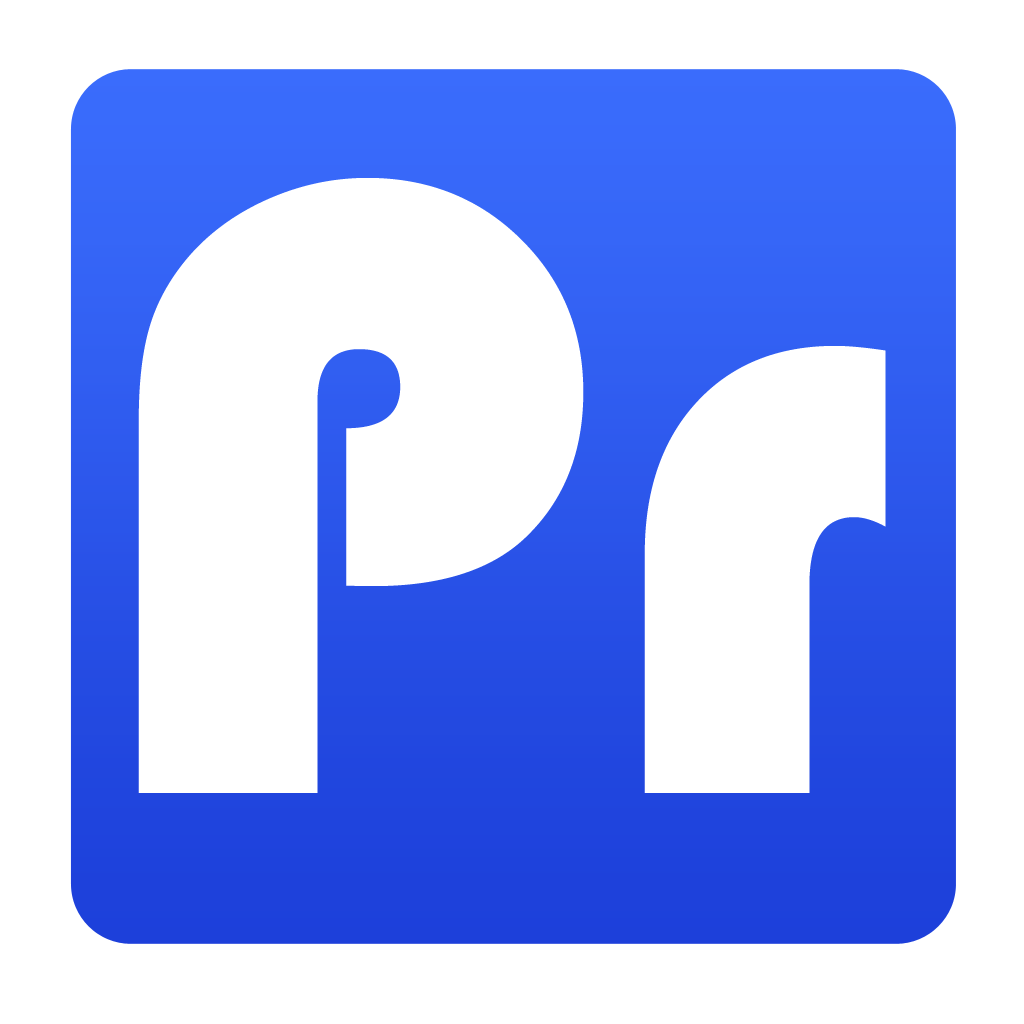
<style>
.page{position:relative;width:1024px;height:1024px;background:#ffffff}
.page>*{position:absolute;margin:0}
.t1{font:900px "Bauhaus93";color:#ffffff}
</style>
<div class="page">
<p class="t1" style="left:138px;top:178px;width:748px;height:615px">Pr</p>
</div>
